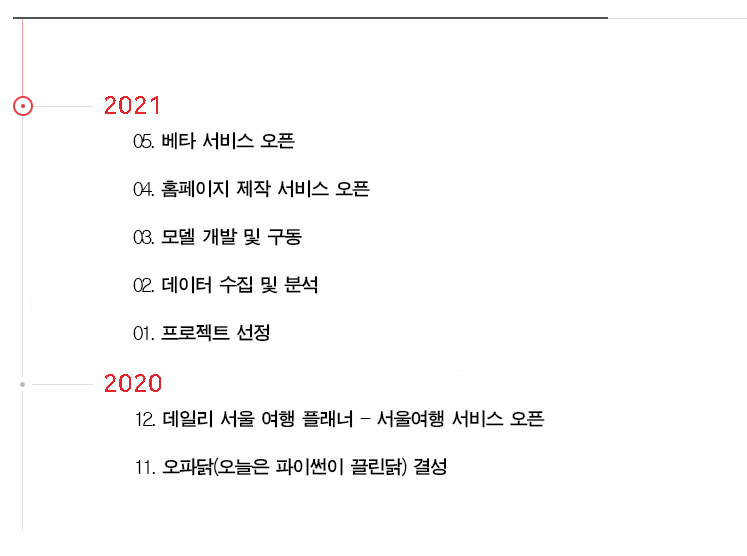
<style>
.page{position:relative;width:747px;height:556px;background:#ffffff}
.page>*{position:absolute;margin:0}
.t1{font:20px "MJemokGothic";letter-spacing:-0.15em;color:#000000;text-transform:uppercase}
.t2{font:20px "Gulim";letter-spacing:-0.15em;color:#000000;text-transform:uppercase}
</style>
<div class="page">
<p class="t1" style="left:133px;top:132px;width:237px;height:210px"><span class="t2">05.</span> 베타 서비스 오픈<br><br><span class="t2">04.</span> 홈페이지 제작 서비스 오픈<br><br><span class="t2">03.</span> 모델 개발 및 구동<br><br><span class="t2">02.</span> 데이터 수집 및 분석<br><br><span class="t2">01.</span> 프로젝트 선정</p>
<p class="t1" style="left:136px;top:410px;width:409px;height:67px"><span class="t2">12.</span> 데일리 서울 여행 플래너 <span class="t2">-</span> 서울여행 서비스 오픈<br><br><span class="t2">11.</span> 오파닭<span class="t2">(</span>오늘은 파이썬이 끌린닭<span class="t2">)</span> 결성</p>
</div>
